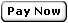
<style>
.page{position:relative;width:68px;height:23px;background:#ffffff}
.page>*{position:absolute;margin:0}
.t1{font:10.3px "Verdana-Bold";letter-spacing:0.025em;color:#000000}
</style>
<div class="page">
<p class="t1" style="left:8px;top:7px;width:52px;height:10px">Pay Now</p>
</div>
